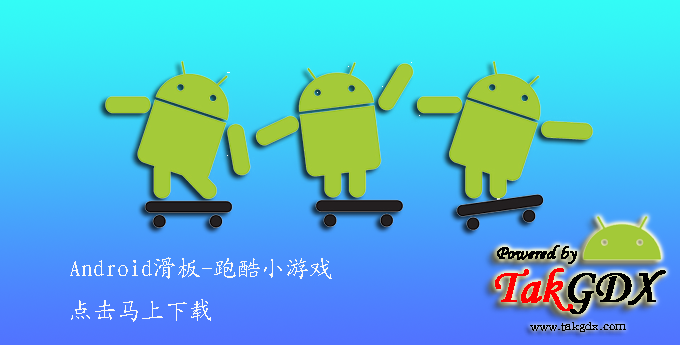
<style>
.page{position:relative;width:680px;height:345px}
.page>*{position:absolute;margin:0}
.t1{font:24px "KaiTi_GB2312";color:#faf9f8}
</style>
<div class="page">
<p class="t1" style="left:70px;top:257px;width:262px;height:65px">Android滑板-跑酷小游戏<br>点击马上下载</p>
</div>
